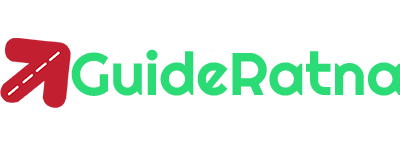
<style>
.page{position:relative;width:400px;height:141px;background:#ffffff}
.page>*{position:absolute;margin:0}
.t1{font:60px "Righteous-Regular";color:#2bdc76}
</style>
<div class="page">
<p class="t1" style="left:71px;top:49px;width:330px;height:47px">GuideRatna</p>
</div>
